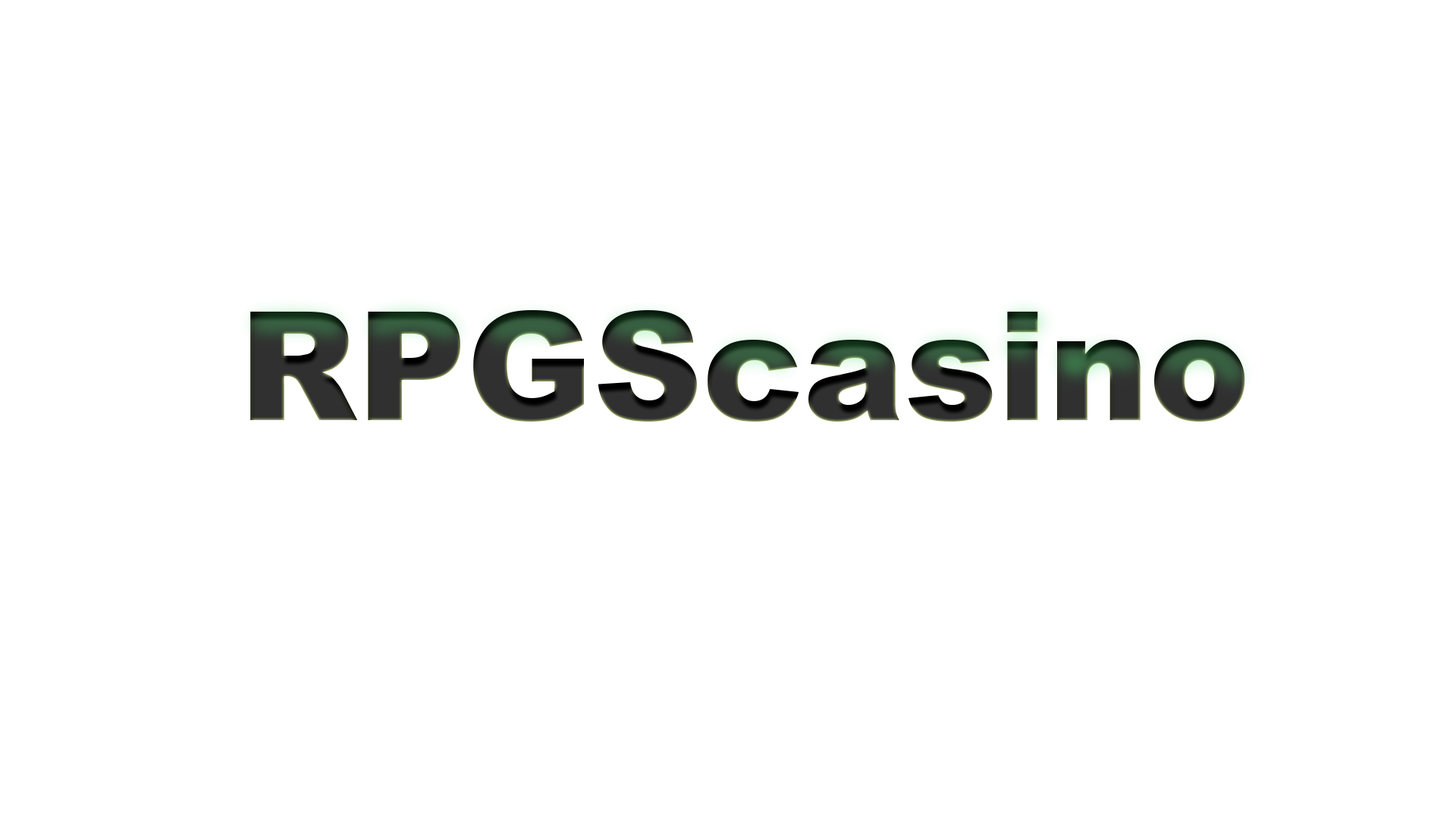
<style>
.page{position:relative;width:1456px;height:819px;background:#ffffff}
.page>*{position:absolute;margin:0}
.t1{font:151.7px "Arial-Black"}
</style>
<div class="page">
<p class="t1" style="left:250px;top:309px;width:995px;height:113px">RPGScasino</p>
</div>
